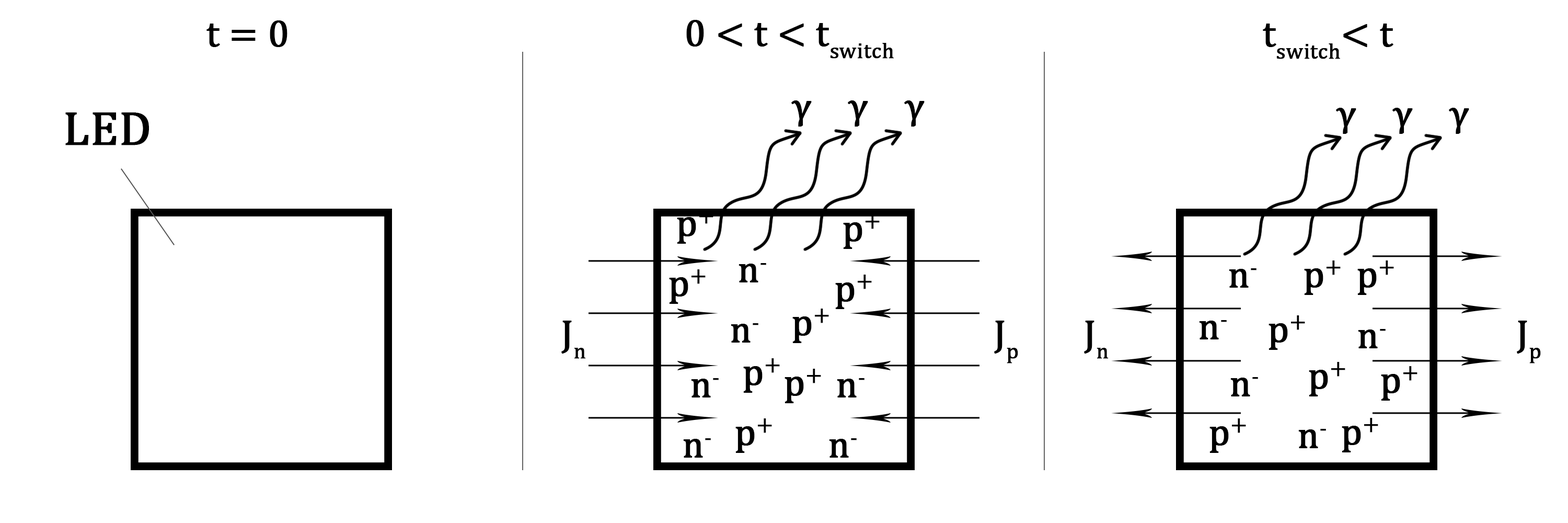
<style>
.page{position:relative;width:1568px;height:523px;background:#ffffff}
.page>*{position:absolute;margin:0}
.t1{font:37.6px "CambriaMath";color:#000000;font-weight:bold}
.t2{font:82.2px "CambriaMath";color:#000000;font-weight:bold}
</style>
<div class="page">
<p class="t1" style="left:206px;top:20px;width:81px;height:27px">t = 0</p>
<p class="t1" style="left:686px;top:20px;width:208px;height:39px">0 &lt; t &lt; tswitch</p>
<p class="t1" style="left:1263px;top:24px;width:130px;height:35px">tswitch&lt; t</p>
<p class="t1" style="left:791px;top:100px;width:134px;height:26px">γ  γ  γ</p>
<p class="t2" style="left:65px;top:112px;width:84px;height:33px">LED</p>
<p class="t1" style="left:1336px;top:108px;width:133px;height:26px">γ  γ  γ</p>
<p class="t1" style="left:677px;top:209px;width:36px;height:35px">p+</p>
<p class="t1" style="left:843px;top:214px;width:37px;height:35px">p+</p>
<p class="t1" style="left:669px;top:269px;width:37px;height:35px">p+</p>
<p class="t1" style="left:739px;top:263px;width:27px;height:19px">n-</p>
<p class="t1" style="left:1229px;top:268px;width:27px;height:19px">n-</p>
<p class="t1" style="left:1304px;top:260px;width:37px;height:35px">p+</p>
<p class="t1" style="left:1357px;top:260px;width:37px;height:35px">p+</p>
<p class="t1" style="left:835px;top:274px;width:37px;height:35px">p+</p>
<p class="t1" style="left:792px;top:308px;width:37px;height:35px">p+</p>
<p class="t1" style="left:1269px;top:315px;width:36px;height:35px">p+</p>
<p class="t1" style="left:561px;top:320px;width:457px;height:43px">Jn                      Jp</p>
<p class="t1" style="left:731px;top:323px;width:27px;height:19px">n-</p>
<p class="t1" style="left:1084px;top:320px;width:457px;height:43px">Jn                      Jp</p>
<p class="t1" style="left:1199px;top:320px;width:28px;height:19px">n-</p>
<p class="t1" style="left:1358px;top:329px;width:28px;height:19px">n-</p>
<p class="t1" style="left:743px;top:358px;width:37px;height:35px">p+</p>
<p class="t1" style="left:1309px;top:362px;width:36px;height:34px">p+</p>
<p class="t1" style="left:1381px;top:366px;width:36px;height:34px">p+</p>
<p class="t1" style="left:691px;top:378px;width:28px;height:19px">n-</p>
<p class="t1" style="left:785px;top:368px;width:36px;height:35px">p+</p>
<p class="t1" style="left:837px;top:378px;width:27px;height:19px">n-</p>
<p class="t1" style="left:1230px;top:377px;width:28px;height:19px">n-</p>
<p class="t1" style="left:735px;top:418px;width:37px;height:35px">p+</p>
<p class="t1" style="left:1209px;top:418px;width:37px;height:35px">p+</p>
<p class="t1" style="left:1342px;top:418px;width:36px;height:34px">p+</p>
<p class="t1" style="left:683px;top:438px;width:28px;height:19px">n-</p>
<p class="t1" style="left:829px;top:438px;width:28px;height:19px">n-</p>
<p class="t1" style="left:1298px;top:429px;width:28px;height:19px">n-</p>
</div>
